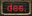
<style>
.page{position:relative;width:32px;height:16px}
.page>*{position:absolute;margin:0}
.t1{font:10px "ArialMT";color:#a51818;font-weight:bold}
</style>
<div class="page">
<p class="t1" style="left:7px;top:3px;width:19px;height:9px">des.</p>
</div>
